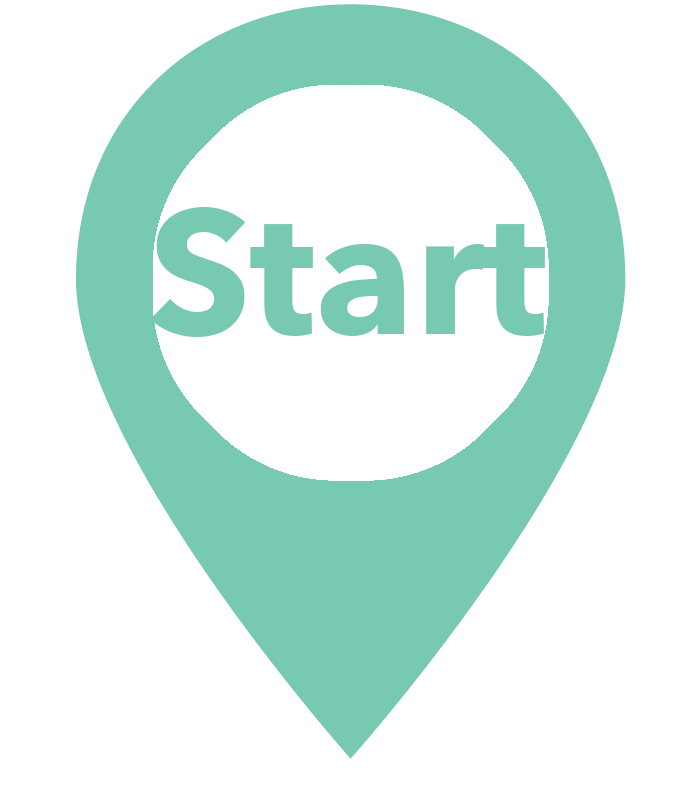
<style>
.page{position:relative;width:685px;height:794px;background:#ffffff}
.page>*{position:absolute;margin:0}
.t1{font:175px "AvenirNext-Bold";color:#77c9b1}
</style>
<div class="page">
<p class="t1" style="left:150px;top:207px;width:395px;height:130px">Start</p>
</div>
